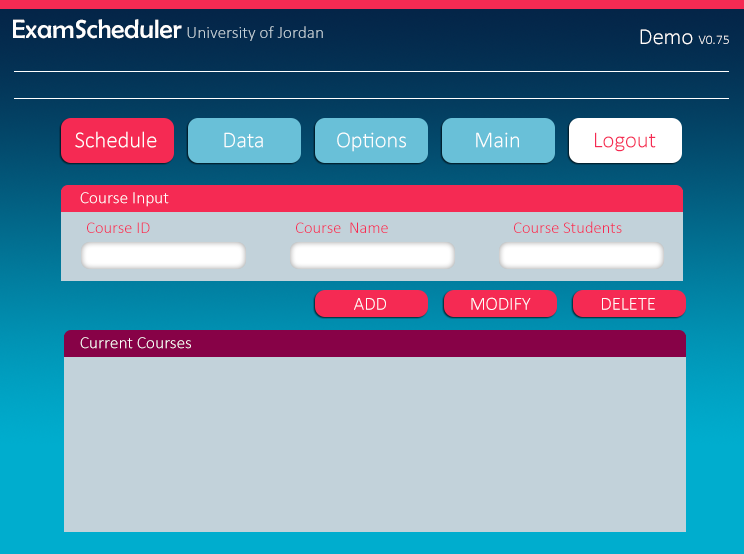
<style>
.page{position:relative;width:744px;height:554px;background:#c2d2da}
.page>*{position:absolute;margin:0}
.t1{font:26.7px "BerlinSansFB-Reg";color:#fefefe}
.t2{font:17.3px "Calibri-Light";color:#c2d2da}
.t3{font:13.3px "Calibri-Light";color:#fefefe}
.t4{font:22.7px "Calibri-Light";color:#fefefe}
.t5{font:22.7px "Calibri-Light";color:#f52a53}
.t6{font:17.3px "Calibri-Light";color:#ffffff}
.t7{font:16.7px "Calibri-Light";color:#f52a53}
.t8{font:18.7px "Calibri-Light";color:#fefefe}
</style>
<div class="page">
<p class="t1" style="left:13px;top:19px;width:169px;height:20px">ExamScheduler</p>
<p class="t2" style="left:187px;top:26px;width:136px;height:15px">University of Jordan</p>
<p class="t3" style="left:640px;top:29px;width:89px;height:16px"><span class="t4">Demo </span>V0.75</p>
<p class="t4" style="left:75px;top:131px;width:82px;height:17px">Schedule</p>
<p class="t4" style="left:224px;top:132px;width:39px;height:16px">Data</p>
<p class="t4" style="left:337px;top:132px;width:69px;height:20px">Options</p>
<p class="t4" style="left:476px;top:132px;width:43px;height:16px">Main</p>
<p class="t5" style="left:595px;top:132px;width:61px;height:20px">Logout</p>
<p class="t6" style="left:80px;top:192px;width:89px;height:15px">Course Input</p>
<p class="t7" style="left:87px;top:222px;width:63px;height:11px">Course ID</p>
<p class="t7" style="left:296px;top:222px;width:92px;height:11px">Course  Name</p>
<p class="t7" style="left:514px;top:221px;width:108px;height:12px">Course Students</p>
<p class="t8" style="left:354px;top:298px;width:32px;height:12px">ADD</p>
<p class="t8" style="left:471px;top:297px;width:60px;height:13px">MODIFY</p>
<p class="t8" style="left:602px;top:298px;width:53px;height:12px">DELETE</p>
<p class="t6" style="left:80px;top:337px;width:111px;height:12px">Current Courses</p>
</div>
